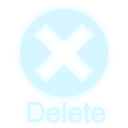
<style>
.page{position:relative;width:128px;height:128px;background:#ffffff}
.page>*{position:absolute;margin:0}
.t1{font:28px "ArialMT";color:#d6f7ff}
</style>
<div class="page">
<p class="t1" style="left:27px;top:102px;width:78px;height:21px">Delete</p>
<p class="t1" style="left:27px;top:102px;width:78px;height:21px">Delete</p>
</div>
